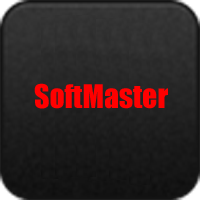
<style>
.page{position:relative;width:200px;height:200px}
.page>*{position:absolute;margin:0}
.t1{font:29.9px "Impact";color:#ff0000}
</style>
<div class="page">
<p class="t1" style="left:34px;top:83px;width:134px;height:26px">SoftMaster</p>
</div>
